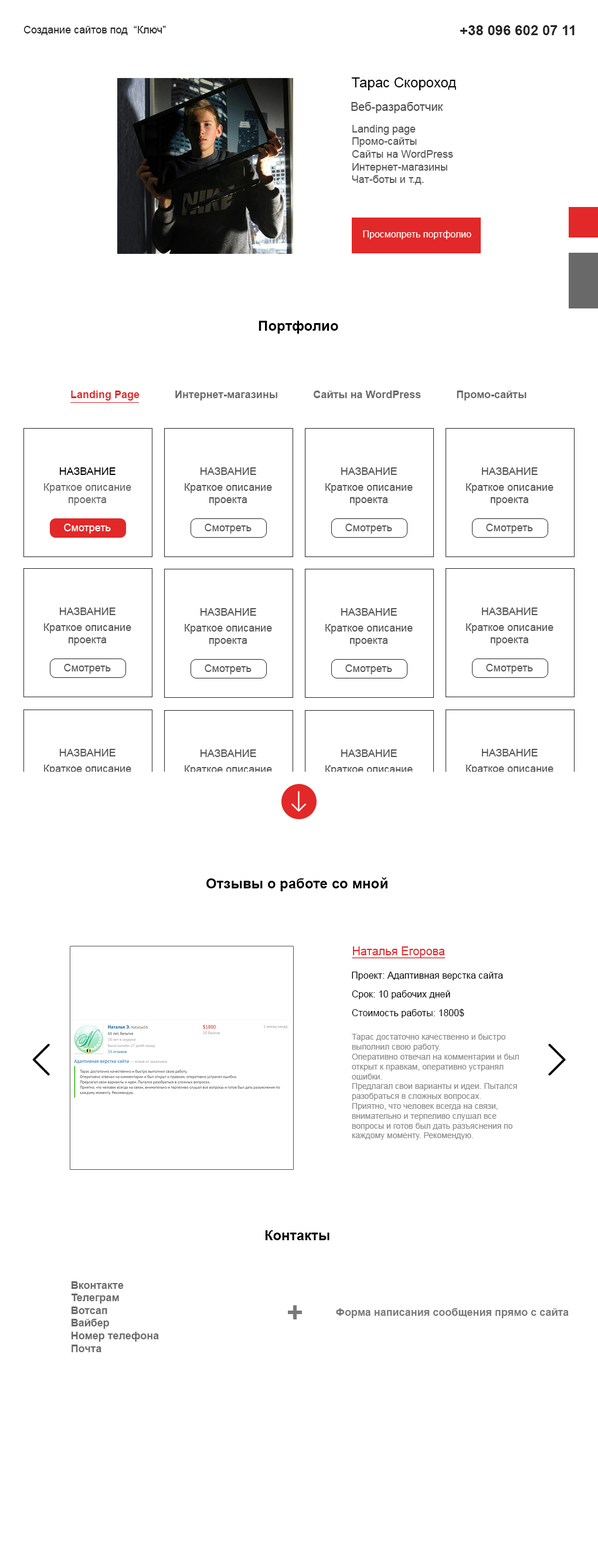
<style>
.page{position:relative;width:598px;height:1568px;background:#ffffff}
.page>*{position:absolute;margin:0}
.t1{font:10.6px "ArialMT";color:#232323}
.t2{font:14.1px "Arial-BoldMT";color:#232323}
.t3{font:14.1px "ArialMT";color:#000000}
.t4{font:11.7px "ArialMT";color:#494949}
.t5{font:10.6px "ArialMT";color:#545454}
.t6{font:9.4px "ArialMT";color:#ffffff}
.t7{font:14.1px "Arial-BoldMT";color:#000000}
.t8{font:10.6px "Arial-BoldMT";color:#696969}
.t9{font:10.6px "Arial-BoldMT";color:#e22828}
.t10{font:10.6px "ArialMT";color:#000000;text-transform:uppercase}
.t11{font:10.6px "ArialMT";color:#000000}
.t12{font:10.6px "ArialMT";color:#545454;text-transform:uppercase}
.t13{font:10.6px "ArialMT";color:#696969}
.t14{font:10.6px "ArialMT";color:#ffffff}
.t15{font:10.6px "ArialMT"}
.t16{font:11.7px "ArialMT";color:#e22828;text-decoration:underline}
.t17{font:9.4px "ArialMT";color:#000000}
.t18{font:8.2px "ArialMT";color:#8b8b8b}
.t19{font:28.1px "Arial-BoldMT";color:#797979}
.t20{font:10.6px "Arial-BoldMT";color:#797979}
</style>
<div class="page">
<p class="t1" style="left:23px;top:26px;width:143px;height:9px">Создание сайтов под  “Ключ”</p>
<p class="t2" style="left:460px;top:25px;width:115px;height:10px">+38 096 602 07 11</p>
<p class="t3" style="left:351px;top:77px;width:105px;height:13px">Тарас Скороход</p>
<p class="t4" style="left:351px;top:102px;width:92px;height:11px">Веб-разработчик</p>
<p class="t5" style="left:352px;top:125px;width:101px;height:60px">Landing page<br>Промо-сайты<br>Сайты на WordPress <br>Интернет-магазины<br>Чат-боты и т.д.</p>
<p class="t6" style="left:363px;top:230px;width:108px;height:9px">Просмопреть портфолио</p>
<p class="t7" style="left:259px;top:321px;width:79px;height:13px">Портфолио</p>
<p class="t8" style="left:71px;top:391px;width:456px;height:10px"><span class="t9">Landing Page            </span>Интернет-магазины            Сайты на WordPress            Промо-сайты</p>
<p class="t10" style="left:60px;top:467px;width:56px;height:8px"><span class="t11">Н</span>азвание</p>
<p class="t12" style="left:201px;top:467px;width:55px;height:8px"><span class="t5">Н</span>азвание</p>
<p class="t12" style="left:341px;top:467px;width:56px;height:8px"><span class="t5">Н</span>азвание</p>
<p class="t12" style="left:482px;top:467px;width:56px;height:8px"><span class="t5">Н</span>азвание</p>
<p class="t13" style="left:44px;top:483px;width:87px;height:22px;text-align:center">Краткое описание<br>проекта</p>
<p class="t5" style="left:185px;top:483px;width:87px;height:22px;text-align:center">Краткое описание<br>проекта</p>
<p class="t5" style="left:325px;top:483px;width:88px;height:22px;text-align:center">Краткое описание<br>проекта</p>
<p class="t5" style="left:466px;top:483px;width:88px;height:22px;text-align:center">Краткое описание<br>проекта</p>
<p class="t14" style="left:64px;top:524px;width:47px;height:10px">Смотреть</p>
<p class="t5" style="left:205px;top:524px;width:47px;height:10px">Смотреть</p>
<p class="t5" style="left:345px;top:524px;width:47px;height:10px">Смотреть</p>
<p class="t5" style="left:486px;top:524px;width:47px;height:10px">Смотреть</p>
<p class="t12" style="left:60px;top:607px;width:56px;height:8px"><span class="t5">Н</span>азвание</p>
<p class="t12" style="left:201px;top:608px;width:55px;height:8px"><span class="t5">Н</span>азвание</p>
<p class="t12" style="left:341px;top:608px;width:56px;height:8px"><span class="t5">Н</span>азвание</p>
<p class="t12" style="left:482px;top:607px;width:56px;height:8px"><span class="t5">Н</span>азвание</p>
<p class="t5" style="left:44px;top:623px;width:87px;height:23px;text-align:center">Краткое описание<br>проекта</p>
<p class="t5" style="left:185px;top:624px;width:87px;height:22px;text-align:center">Краткое описание<br>проекта</p>
<p class="t5" style="left:325px;top:624px;width:88px;height:22px;text-align:center">Краткое описание<br>проекта</p>
<p class="t5" style="left:466px;top:623px;width:88px;height:23px;text-align:center">Краткое описание<br>проекта</p>
<p class="t5" style="left:64px;top:664px;width:47px;height:10px">Смотреть</p>
<p class="t5" style="left:205px;top:664px;width:47px;height:10px">Смотреть</p>
<p class="t5" style="left:345px;top:664px;width:47px;height:10px">Смотреть</p>
<p class="t5" style="left:486px;top:664px;width:47px;height:10px">Смотреть</p>
<p class="t12" style="left:60px;top:749px;width:56px;height:7px"><span class="t5">Н</span>азвание</p>
<p class="t12" style="left:201px;top:749px;width:55px;height:8px"><span class="t5">Н</span>азвание</p>
<p class="t12" style="left:341px;top:749px;width:56px;height:8px"><span class="t5">Н</span>азвание</p>
<p class="t12" style="left:482px;top:749px;width:56px;height:7px"><span class="t5">Н</span>азвание</p>
<p class="t5" style="left:44px;top:765px;width:87px;height:22px;text-align:center">Краткое описание<br>проекта</p>
<p class="t15" style="left:185px;top:765px;width:87px;height:23px;text-align:center">Краткое описание<br>проекта</p>
<p class="t15" style="left:325px;top:765px;width:88px;height:23px;text-align:center">Краткое описание<br>проекта</p>
<p class="t5" style="left:466px;top:765px;width:88px;height:22px;text-align:center">Краткое описание<br>проекта</p>
<p class="t7" style="left:206px;top:877px;width:182px;height:14px">Отзывы о работе со мной</p>
<p class="t16" style="left:352px;top:946px;width:94px;height:13px">Наталья Егорова</p>
<p class="t17" style="left:352px;top:972px;width:151px;height:8px">Проект: Адаптивная верстка сайта</p>
<p class="t17" style="left:352px;top:990px;width:98px;height:9px">Срок: 10 рабочих дней</p>
<p class="t17" style="left:352px;top:1009px;width:112px;height:9px">Стоимость работы: 1800$</p>
<p class="t18" style="left:352px;top:1034px;width:167px;height:106px">Тарас достаточно качественно и быстро выполнил свою работу. <br>Оперативно отвечал на комментарии и был открыт к правкам, оперативно устранял ошибки. <br>Предлагал свои варианты и идеи. Пытался разобраться в сложных вопросах. <br>Приятно, что человек всегда на связи, внимательно и терпеливо слушал все вопросы и готов был дать разъяснения по каждому моменту. Рекомендую.</p>
<p class="t7" style="left:265px;top:1230px;width:65px;height:10px">Контакты</p>
<p class="t8" style="left:72px;top:1281px;width:87px;height:71px">Вконтакте<br>Телеграм<br>Вотсап<br>Вайбер<br>Номер телефона<br>Почта</p>
<p class="t19" style="left:288px;top:1305px;width:14px;height:14px">+</p>
<p class="t20" style="left:336px;top:1308px;width:233px;height:10px">Форма написания сообщения прямо с сайта</p>
</div>
